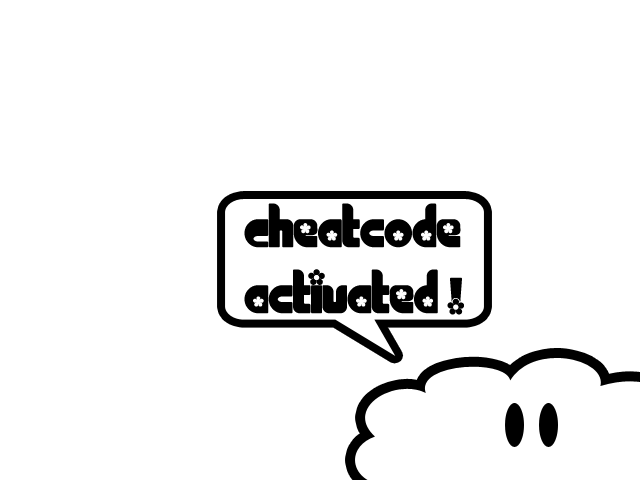
<style>
.page{position:relative;width:640px;height:480px;background:#ffffff}
.page>*{position:absolute;margin:0}
.t1{font:55px "Chick";color:#000000}
</style>
<div class="page">
<p class="t1" style="left:244px;top:203px;width:220px;height:112px">Cheatcode<br>activated !</p>
</div>
